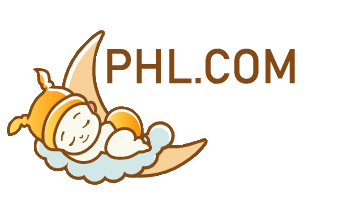
<style>
.page{position:relative;width:337px;height:198px;background:#ffffff}
.page>*{position:absolute;margin:0}
.t1{font:48px "Bahnschrift";color:#834a15;text-transform:uppercase}
</style>
<div class="page">
<p class="t1" style="left:107px;top:48px;width:188px;height:36px">PHL.COM</p>
</div>
